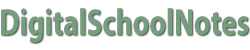
<style>
.page{position:relative;width:250px;height:50px;background:#ffffff}
.page>*{position:absolute;margin:0}
.t1{font:37.3px "MyriadPro-Bold";color:#759f7c;scale:0.78 1}
</style>
<div class="page">
<p class="t1" style="left:1px;top:8px;width:248px;height:35px">DigitalSchoolNotes</p>
</div>
